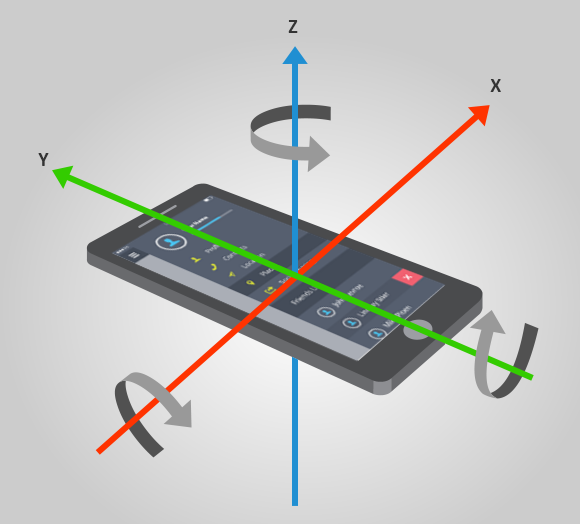
<style>
.page{position:relative;width:580px;height:524px;background:#cccccc}
.page>*{position:absolute;margin:0}
.t1{font:20px "Calibri-Bold";color:#333333}
</style>
<div class="page">
<p class="t1" style="left:288px;top:20px;width:10px;height:13px">Z</p>
<p class="t1" style="left:490px;top:79px;width:11px;height:13px">X</p>
<p class="t1" style="left:38px;top:153px;width:11px;height:13px">Y</p>
</div>
